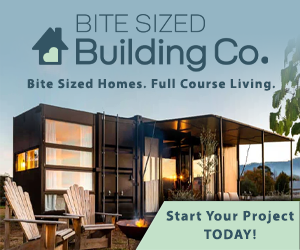
<style>
.page{position:relative;width:300px;height:250px}
.page>*{position:absolute;margin:0}
.t1{font:13px "MyriadPro-Bold";letter-spacing:0.08em;color:#335463}
.t2{font:14px/7px "MyriadPro-Bold";letter-spacing:0.08em;color:#335463}
</style>
<div class="page">
<p class="t1" style="left:27px;top:78px;width:248px;height:13px">Bite Sized Homes. Full Course Living.</p>
<p class="t2" style="left:166px;top:210px;width:128px;height:30px;text-align:center">Start Your Project<br>TODAY!</p>
</div>
